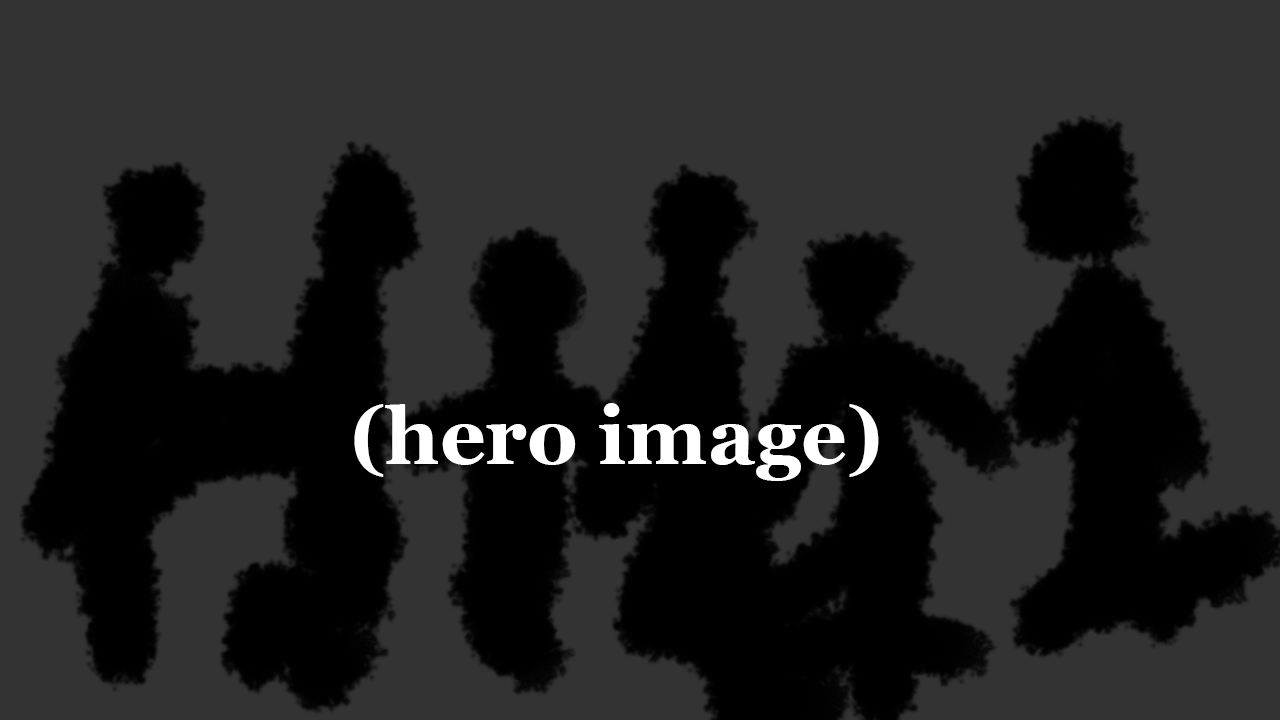
<style>
.page{position:relative;width:1280px;height:720px;background:#333333}
.page>*{position:absolute;margin:0}
.t1{font:80px "Georgia-Bold";color:#ffffff}
</style>
<div class="page">
<p class="t1" style="left:354px;top:403px;width:525px;height:78px">(hero image)</p>
</div>
